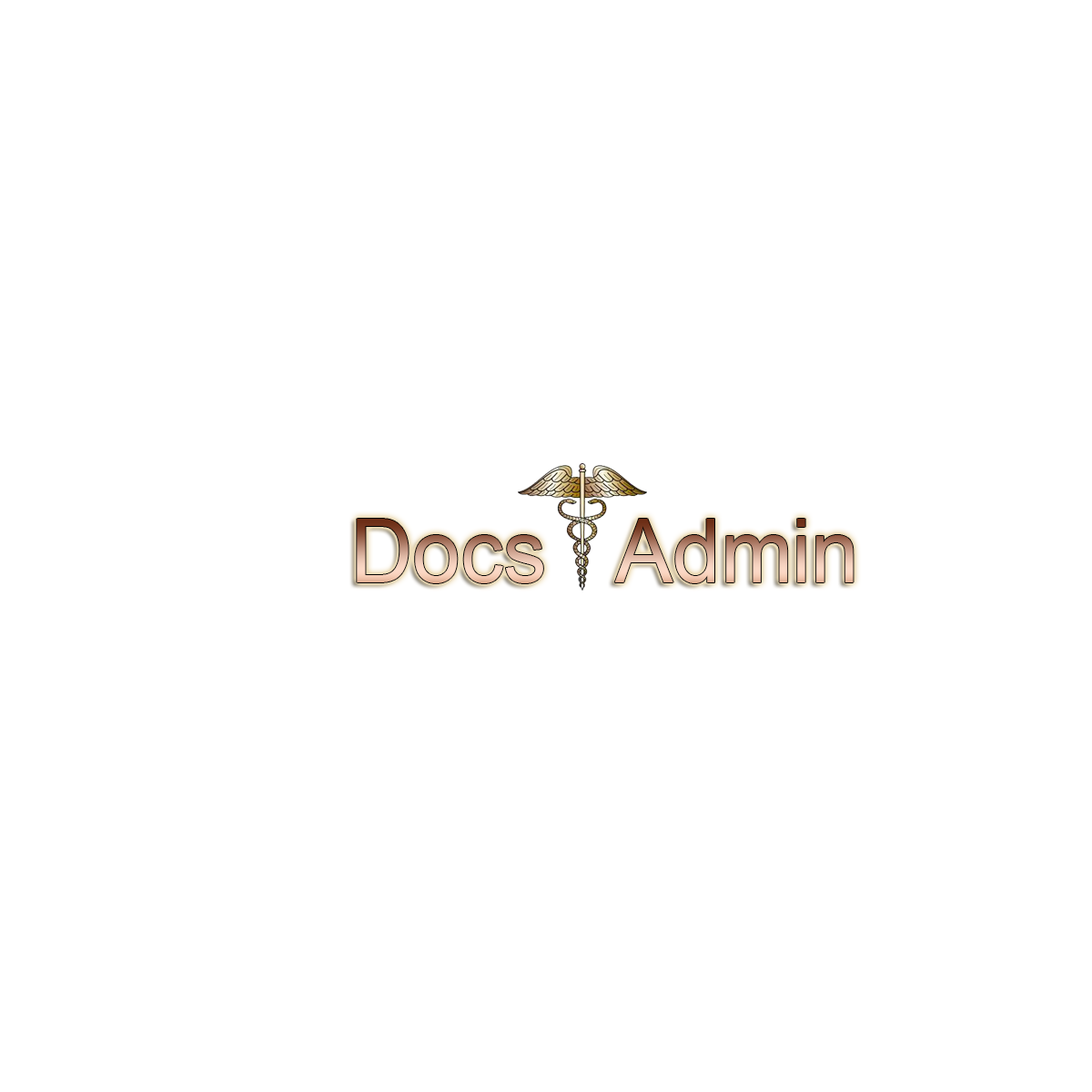
<style>
.page{position:relative;width:1092px;height:1092px;background:#ffffff}
.page>*{position:absolute;margin:0}
.t1{font:88.3px "ArialMT"}
</style>
<div class="page">
<p class="t1" style="left:357px;top:519px;width:186px;height:64px">Docs</p>
<p class="t1" style="left:614px;top:519px;width:240px;height:64px">Admin</p>
</div>
